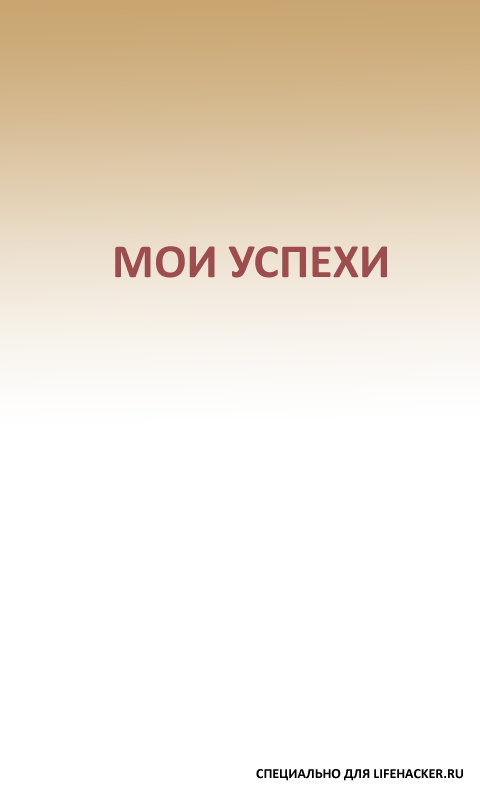
<style>
.page{position:relative;width:480px;height:800px;background:#ffffff}
.page>*{position:absolute;margin:0}
.t1{font:48px "Calibri-Bold";color:#9e4d4d;text-transform:uppercase}
.t2{font:14px "Calibri-Bold";color:#000000;text-transform:uppercase}
</style>
<div class="page">
<p class="t1" style="left:115px;top:246px;width:272px;height:32px">Мои успехи</p>
<p class="t2" style="left:256px;top:769px;width:207px;height:12px">Специально для Lifehacker.ru</p>
</div>
